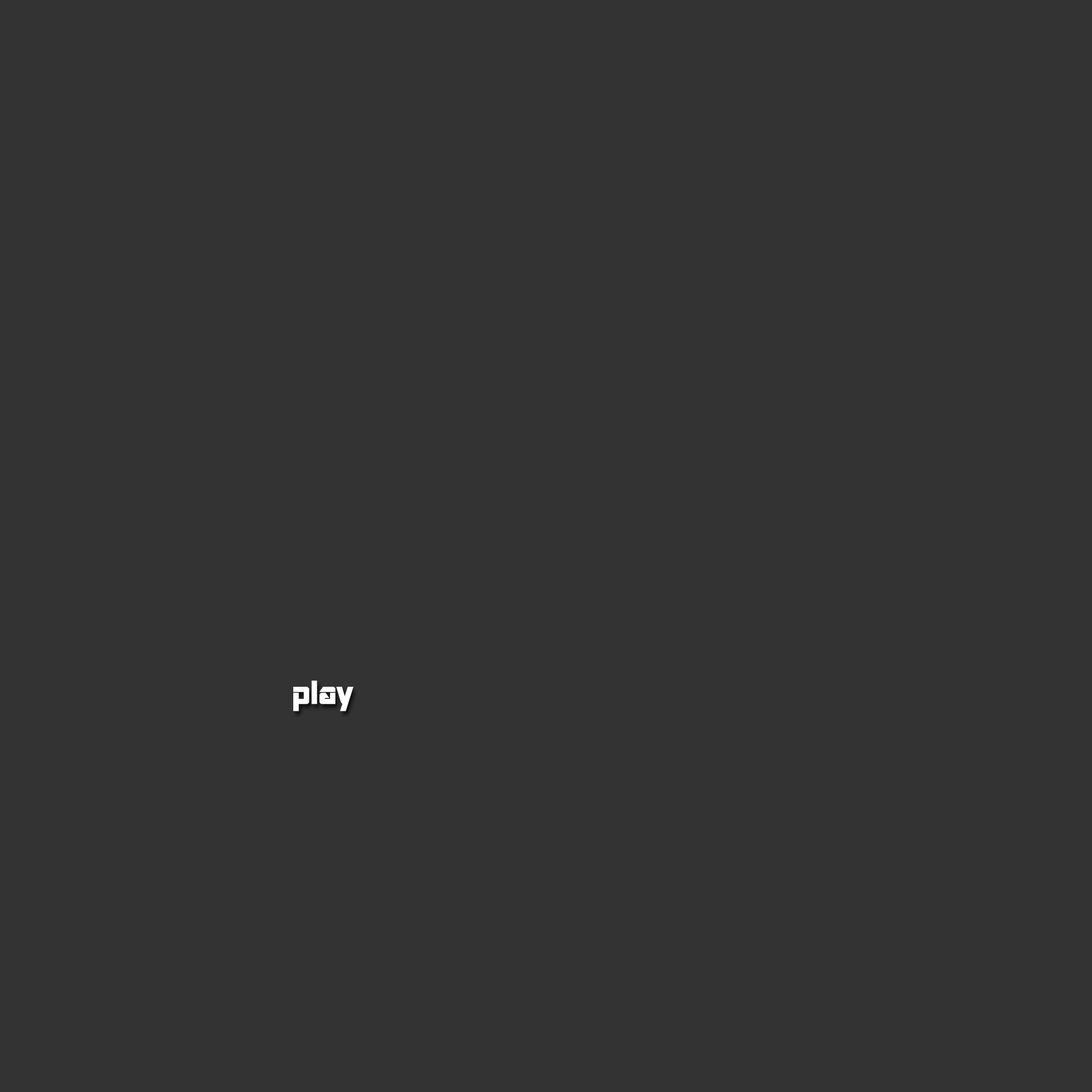
<style>
.page{position:relative;width:1092px;height:1092px;background:#333333}
.page>*{position:absolute;margin:0}
.t1{font:32px "ARDESTINE";color:#ffffff;scale:1.04 1}
</style>
<div class="page">
<p class="t1" style="left:293px;top:680px;width:61px;height:31px">play</p>
</div>
